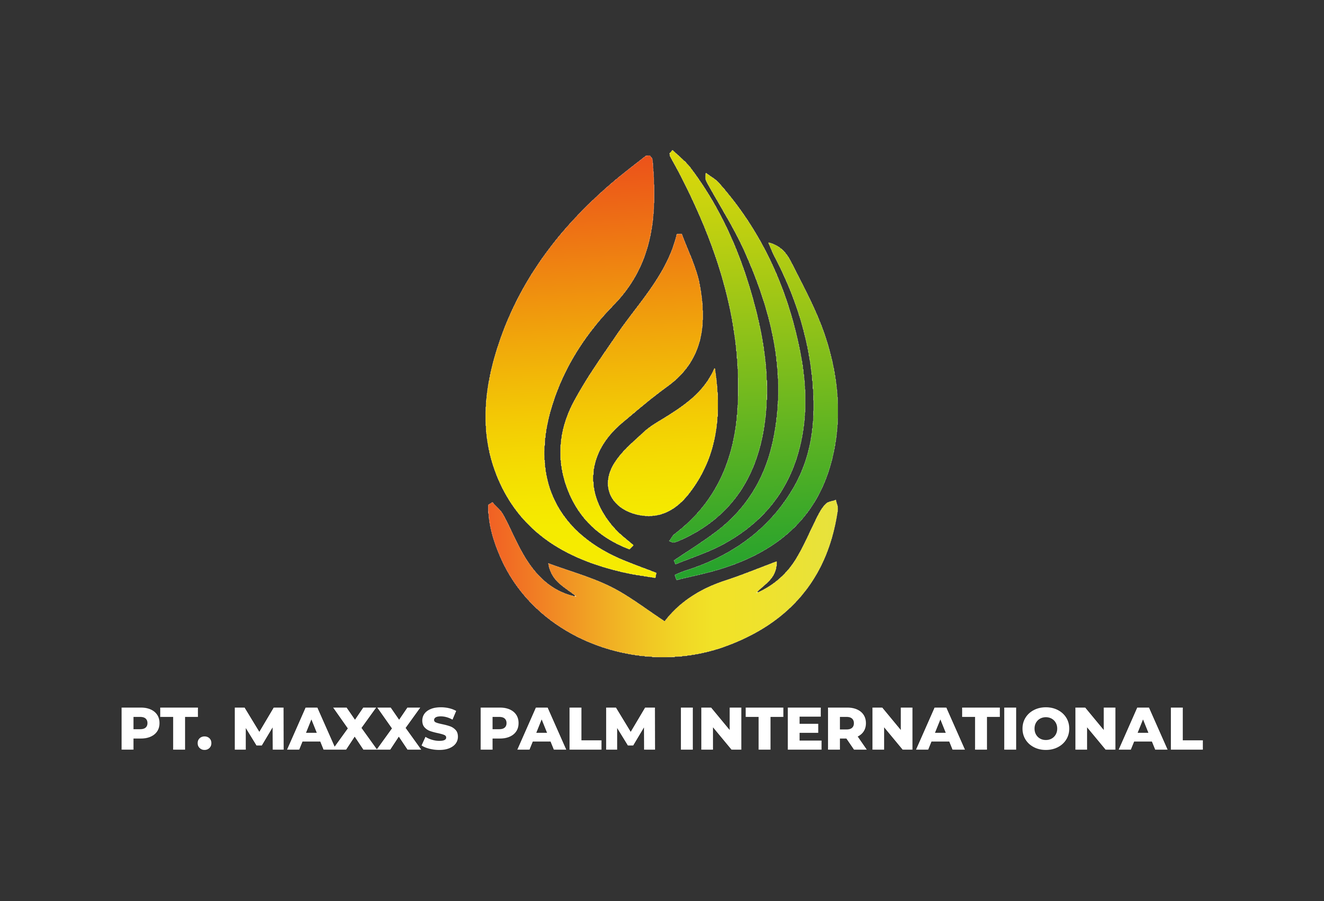
<style>
.page{position:relative;width:1324px;height:901px;background:#333333}
.page>*{position:absolute;margin:0}
.t1{font:60px "Montserrat-ExtraBold";color:#ffffff}
</style>
<div class="page">
<p class="t1" style="left:122px;top:707px;width:1081px;height:43px">PT. MAXXS PALM INTERNATIONAL</p>
</div>
